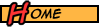
<style>
.page{position:relative;width:99px;height:28px;background:#ffb643}
.page>*{position:absolute;margin:0}
.t1{font:10.3px "AnimeAce2.0BB-Bold";color:#000000}
</style>
<div class="page">
<p class="t1" style="left:30px;top:8px;width:32px;height:11px">ome</p>
</div>
